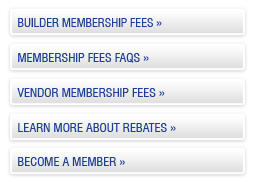
<style>
.page{position:relative;width:262px;height:185px;background:#ffffff}
.page>*{position:absolute;margin:0}
.t1{font:12px "Swiss721BT-RomanCondensed";letter-spacing:-0.002em;color:#1c3f95;text-transform:uppercase}
.t2{font:12px "Swiss721BT-RomanCondensed";color:#1c3f95;text-transform:uppercase}
.t3{font:12.3px "Swiss721BT-RomanCondensed";color:#1c3f95;text-transform:uppercase}
</style>
<div class="page">
<p class="t1" style="left:18px;top:18px;width:144px;height:9px">Builder membership fees <span class="t2">»</span></p>
<p class="t3" style="left:18px;top:53px;width:131px;height:10px">MEMBERSHIP FEES FAQS »</p>
<p class="t3" style="left:17px;top:88px;width:148px;height:9px">VENDOR MEMBERSHIP FEES »</p>
<p class="t3" style="left:18px;top:123px;width:158px;height:9px">LEARN MORE ABOUT REBATES »</p>
<p class="t3" style="left:18px;top:157px;width:107px;height:9px">BECOME A MEMBER »</p>
</div>
